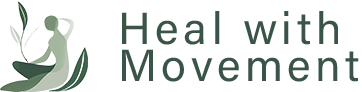
<style>
.page{position:relative;width:362px;height:92px;background:#ffffff}
.page>*{position:absolute;margin:0}
.t1{font:45px/36.3px "AcuminConcept-Regular";letter-spacing:0.1em;color:#3a5447}
</style>
<div class="page">
<p class="t1" style="left:122px;top:11px;width:237px;height:71px">Heal with<br>Movement</p>
</div>
